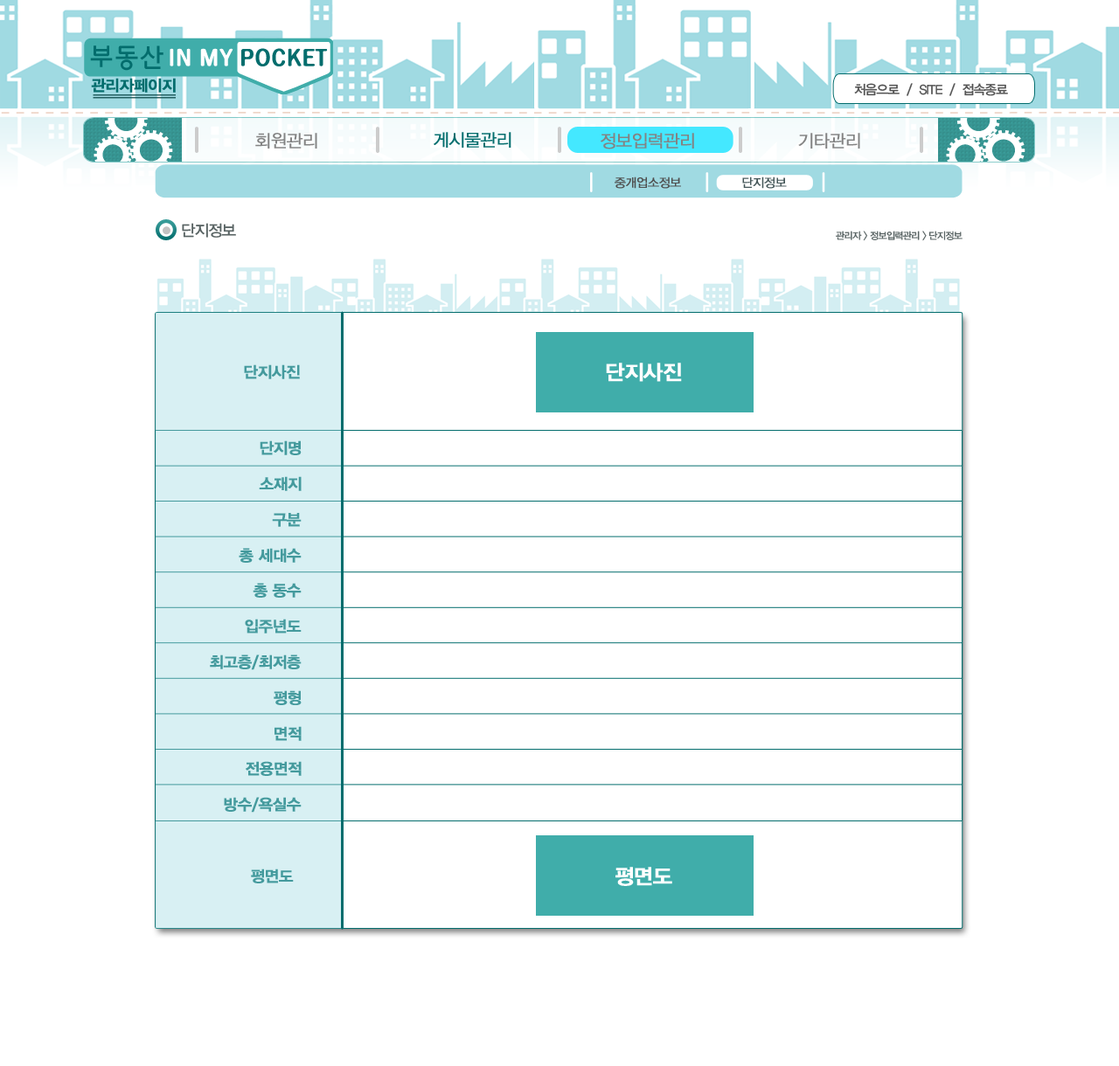
<style>
.page{position:relative;width:1119px;height:1066px;background:#ffffff}
.page>*{position:absolute;margin:0}
.t1{font:15.6px "YDIYGO340";letter-spacing:-0.04em;color:#036d6d;font-weight:bold}
.t2{font:13.1px "YDIYGO330";letter-spacing:-0.06em;color:#535353}
.t3{font:17.5px "YDIYGO320";letter-spacing:-0.04em;color:#838383;font-weight:bold}
.t4{font:17.5px "YDIYGO320";letter-spacing:-0.04em;color:#036d6d;font-weight:bold}
.t5{font:12.2px "YDIYGO320";letter-spacing:-0.04em;color:#4f4f4f;font-weight:bold}
.t6{font:12.2px "YDIYGO320";letter-spacing:-0.04em;color:#445658;font-weight:bold}
.t7{font:15.7px "YDIYGO330";letter-spacing:-0.06em;color:#576262}
.t8{font:9.6px "YDIYGO330";letter-spacing:-0.06em;color:#576262}
.t9{font:15.6px "YDIYGO340";letter-spacing:-0.04em;color:#449a9d;font-weight:bold}
.t10{font:21px "YDIYGO340";letter-spacing:-0.04em;color:#ffffff;font-weight:bold}
</style>
<div class="page">
<p class="t1" style="left:91px;top:78px;width:85px;height:15px">관리자페이지</p>
<p class="t2" style="left:854px;top:83px;width:154px;height:13px">처음으로  /  SITE  /  접속종료</p>
<p class="t3" style="left:255px;top:133px;width:62px;height:16px">회원관리</p>
<p class="t4" style="left:433px;top:132px;width:78px;height:16px">게시물관리</p>
<p class="t3" style="left:600px;top:133px;width:94px;height:16px">정보입력관리</p>
<p class="t3" style="left:798px;top:133px;width:62px;height:16px">기타관리</p>
<p class="t5" style="left:614px;top:177px;width:67px;height:12px">중개업소정보</p>
<p class="t6" style="left:742px;top:177px;width:44px;height:12px">단지정보</p>
<p class="t7" style="left:182px;top:223px;width:54px;height:15px">단지정보</p>
<p class="t8" style="left:835px;top:231px;width:127px;height:10px">관리자 &gt; 정보입력관리 &gt; 단지정보</p>
<p class="t9" style="left:244px;top:364px;width:56px;height:15px">단지사진</p>
<p class="t10" style="left:606px;top:363px;width:76px;height:19px">단지사진</p>
<p class="t9" style="left:260px;top:440px;width:41px;height:15px">단지명</p>
<p class="t9" style="left:259px;top:476px;width:42px;height:15px">소재지</p>
<p class="t9" style="left:272px;top:513px;width:29px;height:14px">구분</p>
<p class="t9" style="left:239px;top:548px;width:62px;height:15px">총 세대수</p>
<p class="t9" style="left:253px;top:583px;width:48px;height:15px">총 동수</p>
<p class="t9" style="left:245px;top:619px;width:56px;height:15px">입주년도</p>
<p class="t9" style="left:210px;top:655px;width:91px;height:15px">최고층/최저층</p>
<p class="t9" style="left:274px;top:690px;width:27px;height:15px">평형</p>
<p class="t9" style="left:274px;top:726px;width:27px;height:15px">면적</p>
<p class="t9" style="left:246px;top:761px;width:55px;height:15px">전용면적</p>
<p class="t9" style="left:224px;top:797px;width:77px;height:16px">방수/욕실수</p>
<p class="t9" style="left:251px;top:869px;width:43px;height:14px">평면도</p>
<p class="t10" style="left:615px;top:867px;width:57px;height:19px">평면도</p>
</div>
